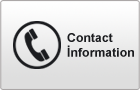
<style>
.page{position:relative;width:140px;height:90px}
.page>*{position:absolute;margin:0}
.t1{font:12.3px "Arial-BoldMT";color:#1b1c1f}
</style>
<div class="page">
<p class="t1" style="left:67px;top:33px;width:67px;height:24px">Contact<br>İnformation</p>
</div>
